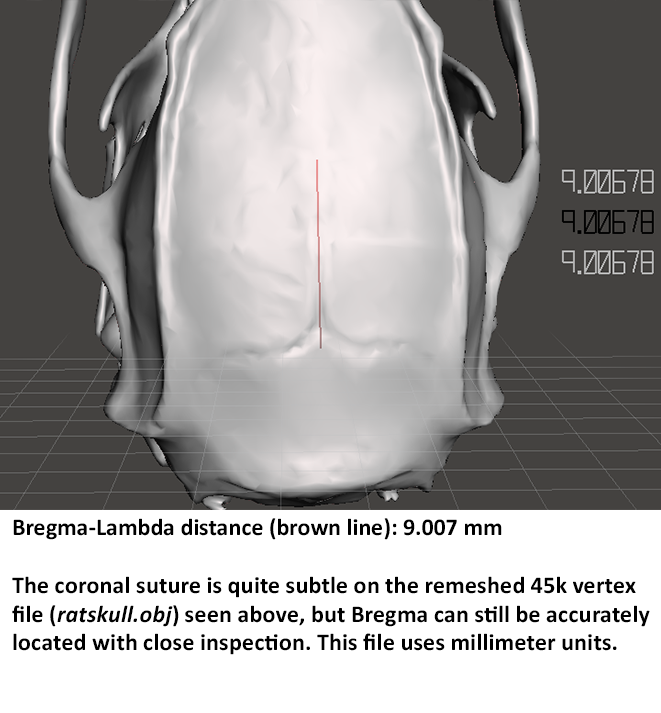
<style>
.page{position:relative;width:661px;height:713px;background:#444240}
.page>*{position:absolute;margin:0}
.t1{font:24px "Calibri-Bold";color:#000000}
.t2{font:24px "Calibri-BoldItalic";color:#000000}
</style>
<div class="page">
<p class="t1" style="left:12px;top:518px;width:638px;height:137px">Bregma-Lambda distance (brown line): 9.007 mm<br><br>The coronal suture is quite subtle on the remeshed 45k vertex file (<span class="t2">ratskull.obj</span>) seen above, but Bregma can still be accurately located with close inspection. This file uses millimeter units.</p>
</div>
